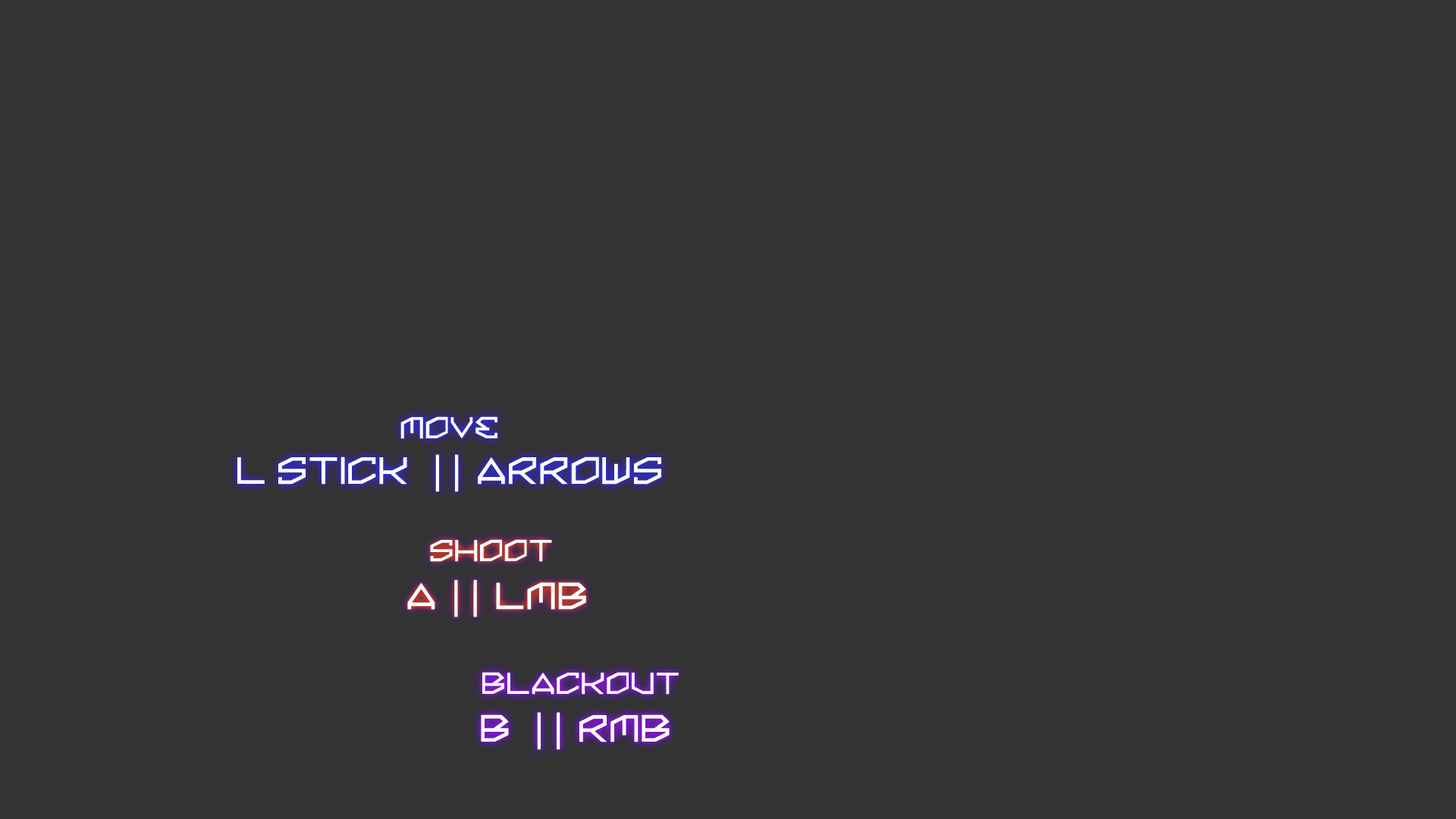
<style>
.page{position:relative;width:1456px;height:819px;background:#333333}
.page>*{position:absolute;margin:0}
.t1{font:30.3px "KinineAlpha";color:#ffffff}
.t2{font:37.9px "KinineAlpha";color:#ffffff}
.t3{font:37.7px "KinineAlpha";color:#ffffff}
</style>
<div class="page">
<p class="t1" style="left:400px;top:416px;width:97px;height:23px">Move</p>
<p class="t2" style="left:237px;top:454px;width:424px;height:38px">L Stick  || ARROWS</p>
<p class="t1" style="left:430px;top:539px;width:122px;height:23px">Shoot</p>
<p class="t3" style="left:407px;top:579px;width:179px;height:38px">A || LMB</p>
<p class="t1" style="left:482px;top:672px;width:197px;height:23px">Blackout</p>
<p class="t2" style="left:481px;top:712px;width:189px;height:38px">B  || RMB</p>
</div>
